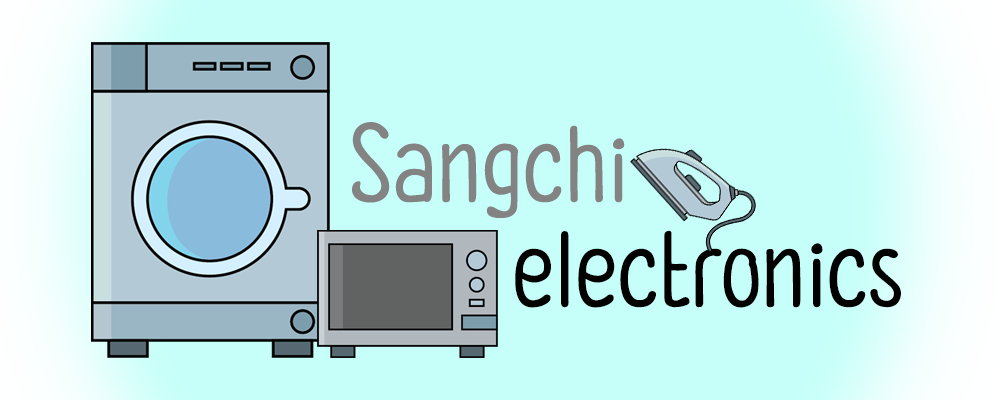
<style>
.page{position:relative;width:1000px;height:400px;background:#c6fff9}
.page>*{position:absolute;margin:0}
.t1{font:200px "waan-Regular";color:#838383}
.t2{font:200px "waan-Regular";color:#000000}
</style>
<div class="page">
<p class="t1" style="left:352px;top:122px;width:273px;height:96px">Sangchi</p>
<p class="t2" style="left:515px;top:230px;width:386px;height:78px">electronics</p>
</div>
